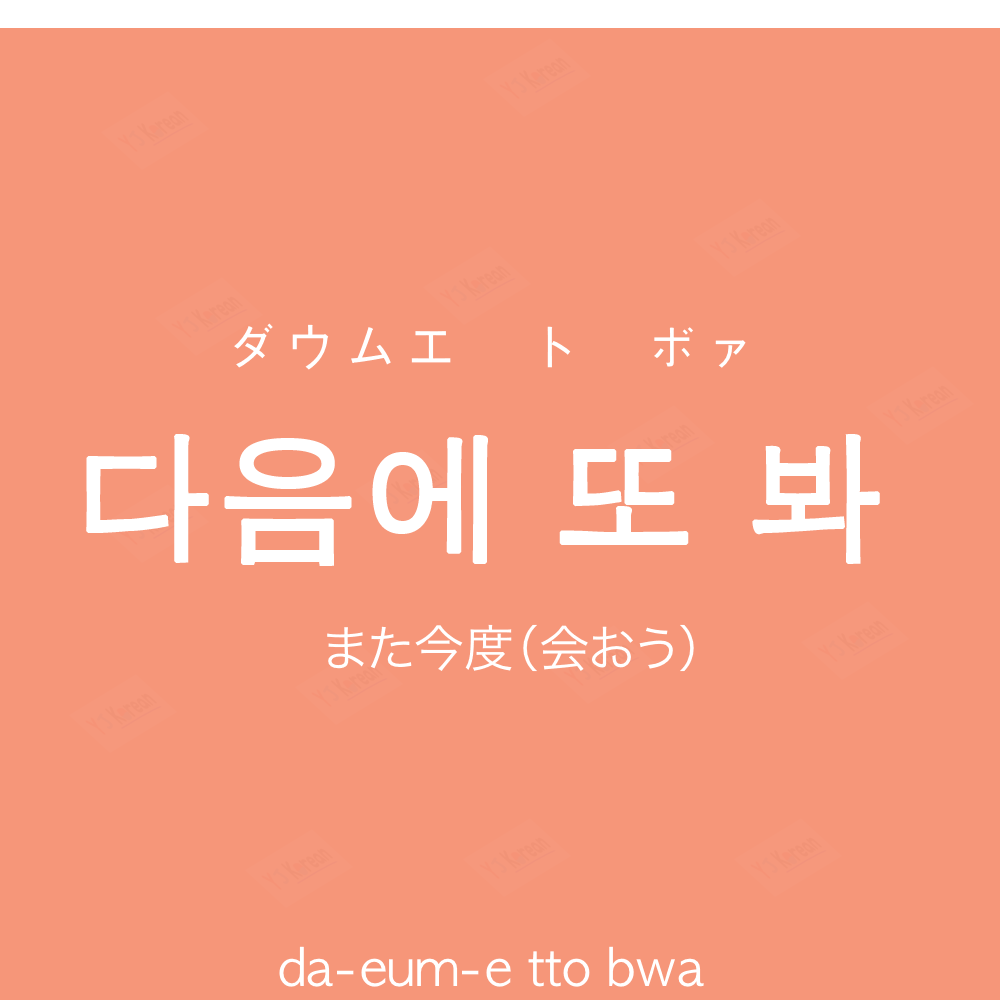
<style>
.page{position:relative;width:1000px;height:1000px;background:#f69679}
.page>*{position:absolute;margin:0}
.t1{font:60px "AppleGothic";color:#ffffff}
.t2{font:140px "AppleGothic";color:#ffffff;font-weight:bold}
.t3{font:50px "HiraKakuProN-W3";color:#ffffff}
.t4{font:50px "AppleGothic";color:#ffffff}
</style>
<div class="page">
<p class="t1" style="left:234px;top:323px;width:512px;height:47px">ダウムエ　ト　ボァ</p>
<p class="t2" style="left:86px;top:434px;width:794px;height:132px">다음에 또 봐</p>
<p class="t3" style="left:327px;top:624px;width:367px;height:48px">また今度（会おう）</p>
<p class="t4" style="left:279px;top:946px;width:425px;height:41px">da-eum-e tto bwa</p>
</div>
